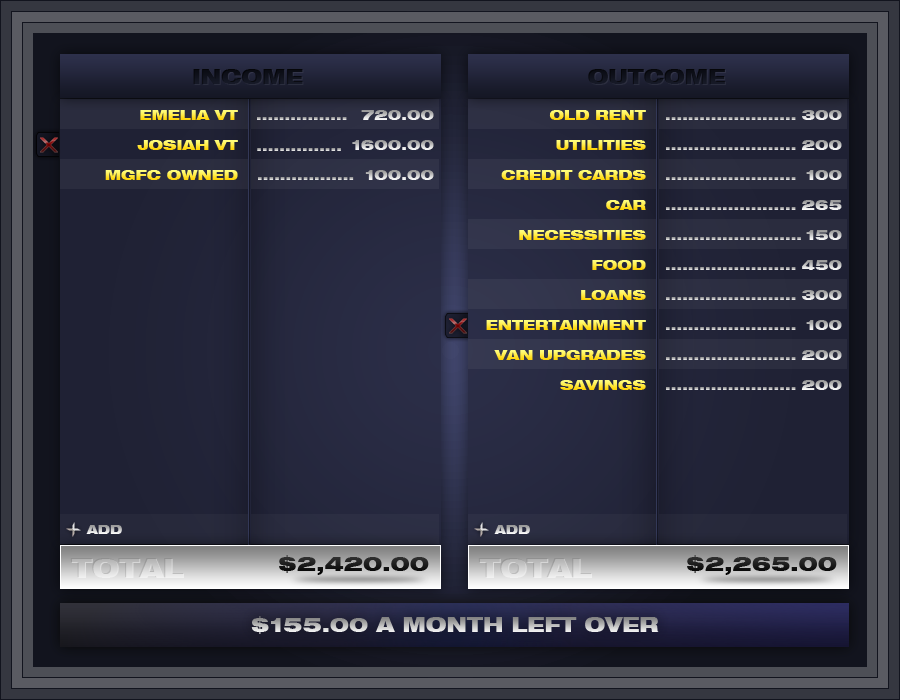
<style>
.page{position:relative;width:900px;height:700px}
.page>*{position:absolute;margin:0}
.t1{font:20px "HelveticaNeueLT-BlackExt";color:#0f111b}
.t2{font:20px "HelveticaNeueLT-BlackExt";color:#0e1019}
.t3{font:14px "HelveticaNeueLT-BlackExt"}
.t4{font:12px "HelveticaNeueLT-BlackExt"}
.t5{font:20px "HelveticaNeueLT-BlackExt";color:#1c1c1c}
.t6{font:20px "HelveticaNeueLT-BlackExt"}
</style>
<div class="page">
<p class="t1" style="left:193px;top:69px;width:110px;height:15px">INCOME</p>
<p class="t2" style="left:588px;top:69px;width:137px;height:15px">OUTCOME</p>
<p class="t3" style="left:140px;top:110px;width:98px;height:10px">EMELIA VT</p>
<p class="t3" style="left:361px;top:110px;width:73px;height:10px">720.00</p>
<p class="t3" style="left:549px;top:110px;width:97px;height:10px">OLD RENT</p>
<p class="t3" style="left:802px;top:110px;width:40px;height:10px">300</p>
<p class="t3" style="left:257px;top:117px;width:90px;height:3px">................</p>
<p class="t3" style="left:666px;top:117px;width:130px;height:3px">.......................</p>
<p class="t3" style="left:137px;top:140px;width:101px;height:10px">JOSIAH VT</p>
<p class="t3" style="left:257px;top:148px;width:84px;height:3px">...............</p>
<p class="t3" style="left:352px;top:140px;width:82px;height:10px">1600.00</p>
<p class="t3" style="left:556px;top:140px;width:90px;height:10px">UTILITIES</p>
<p class="t3" style="left:666px;top:147px;width:130px;height:3px">.......................</p>
<p class="t3" style="left:801px;top:140px;width:41px;height:10px">200</p>
<p class="t3" style="left:105px;top:170px;width:133px;height:10px">MGFC OWNED</p>
<p class="t3" style="left:365px;top:170px;width:69px;height:10px">100.00</p>
<p class="t3" style="left:501px;top:170px;width:145px;height:10px">CREDIT CARDS</p>
<p class="t3" style="left:806px;top:170px;width:36px;height:10px">100</p>
<p class="t3" style="left:258px;top:177px;width:96px;height:3px">.................</p>
<p class="t3" style="left:666px;top:177px;width:130px;height:3px">.......................</p>
<p class="t3" style="left:606px;top:200px;width:40px;height:10px">CAR</p>
<p class="t3" style="left:666px;top:207px;width:130px;height:3px">.......................</p>
<p class="t3" style="left:801px;top:200px;width:41px;height:10px">265</p>
<p class="t3" style="left:519px;top:230px;width:127px;height:10px">NECESSITIES</p>
<p class="t3" style="left:806px;top:230px;width:36px;height:10px">150</p>
<p class="t3" style="left:666px;top:237px;width:135px;height:3px">........................</p>
<p class="t3" style="left:592px;top:260px;width:54px;height:10px">FOOD</p>
<p class="t3" style="left:666px;top:267px;width:130px;height:3px">.......................</p>
<p class="t3" style="left:802px;top:260px;width:40px;height:10px">450</p>
<p class="t3" style="left:581px;top:290px;width:65px;height:10px">LOANS</p>
<p class="t3" style="left:802px;top:290px;width:40px;height:10px">300</p>
<p class="t3" style="left:666px;top:297px;width:130px;height:3px">.......................</p>
<p class="t3" style="left:486px;top:320px;width:160px;height:10px">ENTERTAINMENT</p>
<p class="t3" style="left:666px;top:327px;width:130px;height:3px">.......................</p>
<p class="t3" style="left:806px;top:320px;width:36px;height:10px">100</p>
<p class="t3" style="left:494px;top:350px;width:152px;height:10px">VAN UPGRADES</p>
<p class="t3" style="left:801px;top:350px;width:41px;height:10px">200</p>
<p class="t3" style="left:666px;top:357px;width:130px;height:3px">.......................</p>
<p class="t3" style="left:560px;top:380px;width:86px;height:10px">SAVINGS</p>
<p class="t3" style="left:666px;top:387px;width:130px;height:3px">.......................</p>
<p class="t3" style="left:801px;top:380px;width:41px;height:10px">200</p>
<p class="t4" style="left:86px;top:525px;width:36px;height:9px">ADD</p>
<p class="t4" style="left:494px;top:525px;width:36px;height:9px">ADD</p>
<p class="t5" style="left:279px;top:555px;width:150px;height:20px">$2,420.00</p>
<p class="t5" style="left:687px;top:555px;width:150px;height:20px">$2,265.00</p>
<p class="t6" style="left:251px;top:616px;width:408px;height:18px">$155.00 A MONTH LEFT OVER</p>
</div>
